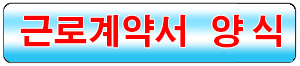
<style>
.page{position:relative;width:300px;height:66px;background:#ffffff}
.page>*{position:absolute;margin:0}
.t1{font:34.3px "AdobeGothicStd-Bold";color:#ff0000}
</style>
<div class="page">
<p class="t1" style="left:20px;top:14px;width:262px;height:34px">근로계약서   양 식</p>
</div>
